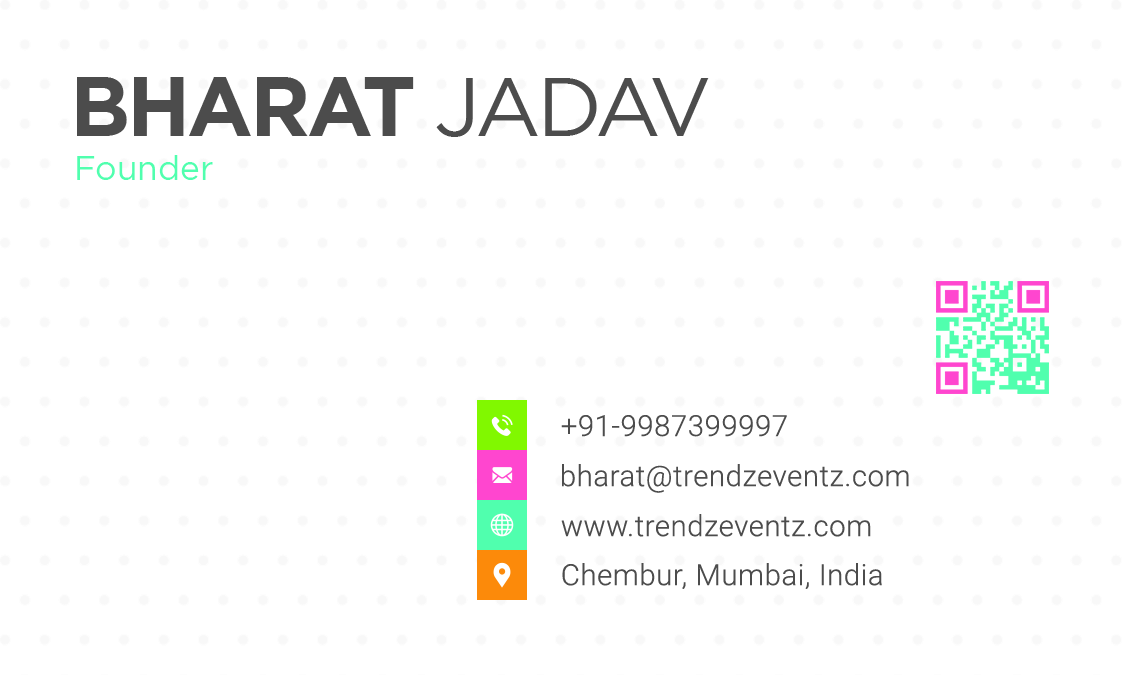
<style>
.page{position:relative;width:1125px;height:675px;background:#ffffff}
.page>*{position:absolute;margin:0}
.t1{font:83.3px "HomepageBaukasten-Bold";letter-spacing:-0.04em;color:#4c4c4c;text-transform:uppercase}
.t2{font:83.3px "HomepageBaukasten-Book";letter-spacing:-0.04em;color:#4c4c4c;text-transform:uppercase}
.t3{font:33.3px "HomepageBaukasten-Book";color:#50ffae}
.t4{font:29.2px "Roboto-Light";letter-spacing:0.02em;color:#4c4c4c}
</style>
<div class="page">
<p class="t1" style="left:77px;top:77px;width:632px;height:60px">BHARAT <span class="t2">JADAV</span></p>
<p class="t3" style="left:77px;top:155px;width:136px;height:25px">Founder</p>
<p class="t4" style="left:561px;top:415px;width:226px;height:22px">+91-9987399997</p>
<p class="t4" style="left:562px;top:464px;width:347px;height:29px">bharat@trendzeventz.com</p>
<p class="t4" style="left:561px;top:514px;width:310px;height:23px">www.trendzeventz.com</p>
<p class="t4" style="left:562px;top:563px;width:320px;height:26px">Chembur, Mumbai, India</p>
</div>
